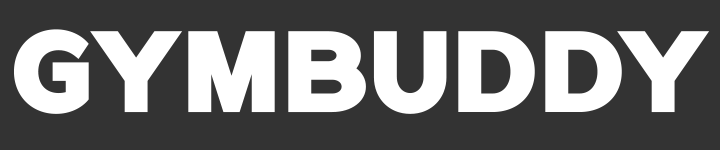
<style>
.page{position:relative;width:720px;height:150px;background:#333333}
.page>*{position:absolute;margin:0}
.t1{font:115.4px "MerichRegular";letter-spacing:0.005em;color:#ffffff}
</style>
<div class="page">
<p class="t1" style="left:14px;top:29px;width:696px;height:85px">GYMBUDDY</p>
</div>
